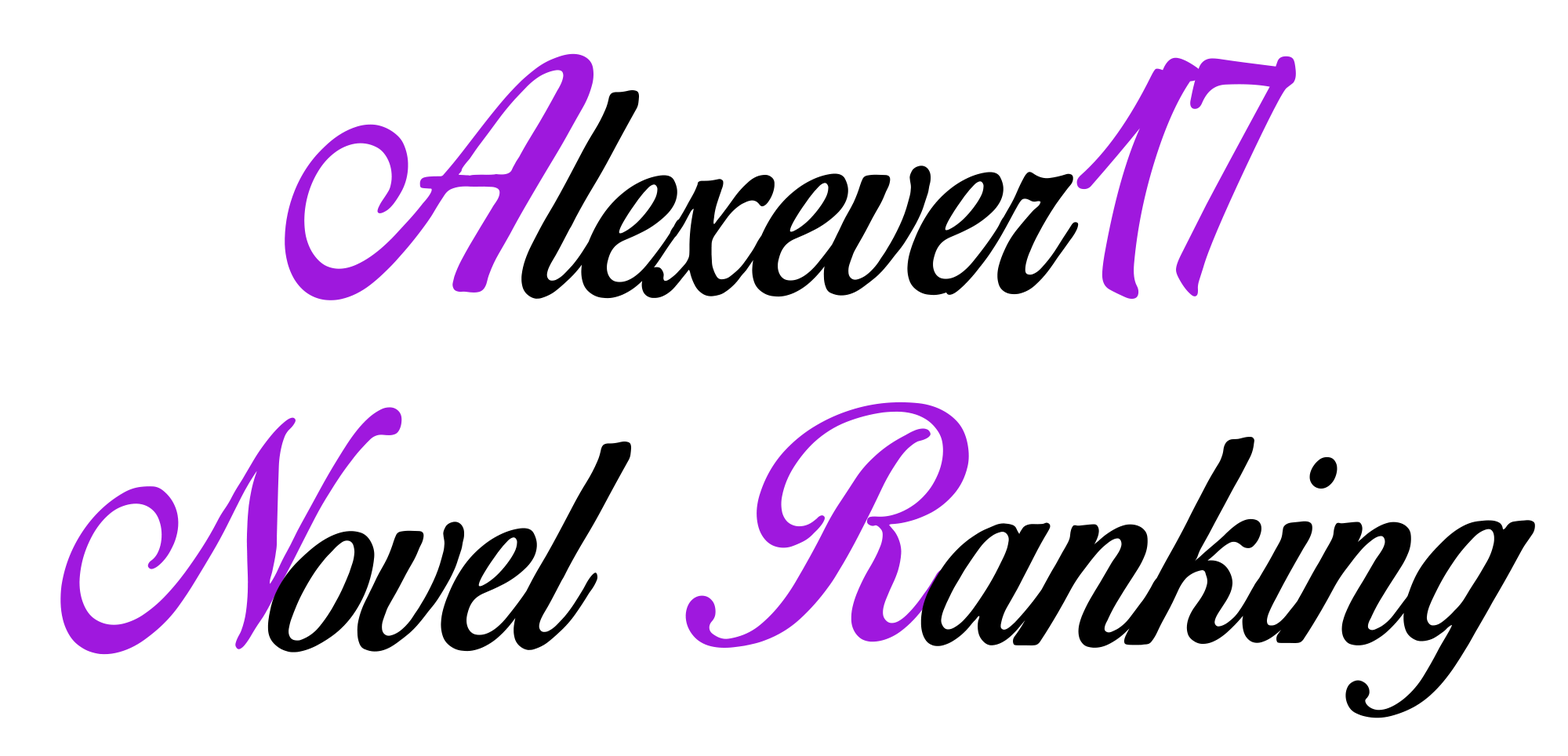
<style>
.page{position:relative;width:1568px;height:756px;background:#ffffff}
.page>*{position:absolute;margin:0}
.t1{font:292.7px "BirdsofParadise";color:#000000;scale:0.92 1}
.t2{font:292.7px "BirdsofParadise";color:#9e18dd;scale:0.92 1}
.t3{font:478px "Pristina-Regular";letter-spacing:-0.01em;color:#9f18de;scale:0.92 1}
.t4{font:292.7px "Pristina-Regular";letter-spacing:-0.01em;color:#9f18de;font-weight:bold;scale:0.92 1}
.t5{font:292.7px "BirdsofParadise";color:#9f18de;scale:0.92 1}
</style>
<div class="page">
<p class="t1" style="left:60px;top:53px;width:1475px;height:665px;text-align:center;rotate:-1deg"><span class="t2">A</span>lexever<span class="t3">1</span><span class="t4">7<br></span><span class="t5">N</span>ovel <span class="t5">R</span>anking</p>
</div>
